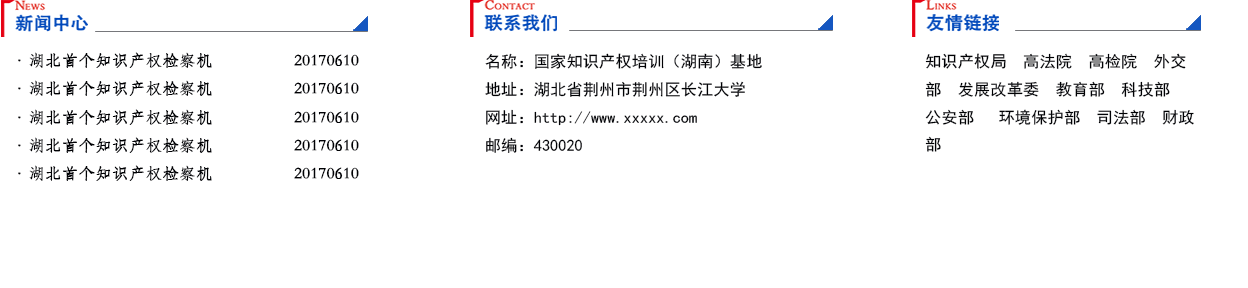
<style>
.page{position:relative;width:1248px;height:288px;background:#ffffff}
.page>*{position:absolute;margin:0}
.t1{font:15.9px "STFangsong";color:#000104;font-weight:bold}
.t2{font:15.9px "SimHei";color:#000104}
</style>
<div class="page">
<p class="t1" style="left:18px;top:52px;width:341px;height:16px">·湖北首个知识产权检察机                  20170610</p>
<p class="t2" style="left:485px;top:53px;width:277px;height:100px">名称：国家知识产权培训（湖南）基地<br>地址：湖北省荆州市荆州区长江大学<br>网址：http://www.xxxxx.com<br>邮编：430020</p>
<p class="t2" style="left:925px;top:53px;width:269px;height:99px">知识产权局  高法院  高检院  外交部  发展改革委  教育部  科技部  公安部   环境保护部  司法部  财政部</p>
<p class="t1" style="left:18px;top:80px;width:341px;height:16px">·湖北首个知识产权检察机                  20170610</p>
<p class="t1" style="left:18px;top:109px;width:341px;height:16px">·湖北首个知识产权检察机                  20170610</p>
<p class="t1" style="left:18px;top:137px;width:341px;height:16px">·湖北首个知识产权检察机                  20170610</p>
<p class="t1" style="left:18px;top:165px;width:341px;height:16px">·湖北首个知识产权检察机                  20170610</p>
</div>
